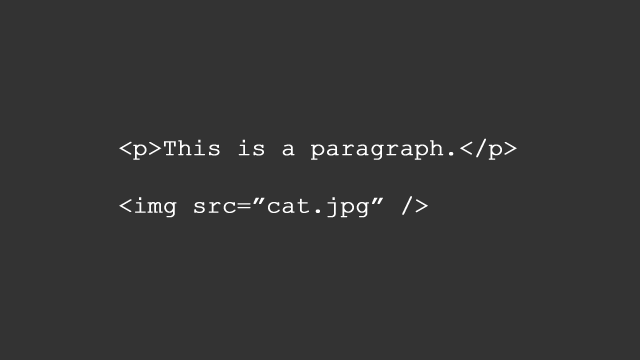
<style>
.page{position:relative;width:640px;height:360px;background:#333333}
.page>*{position:absolute;margin:0}
.t1{font:24px "CourierNewPSMT";letter-spacing:-0.01em;color:#ffffff;font-weight:bold}
</style>
<div class="page">
<p class="t1" style="left:119px;top:138px;width:398px;height:80px">&lt;p&gt;This is a paragraph.&lt;/p&gt;<br><br>&lt;img src=”cat.jpg” /&gt;</p>
</div>
